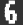
<style>
.page{position:relative;width:23px;height:25px;background:#333333}
.page>*{position:absolute;margin:0}
.t1{font:38.9px "VT323-Regular";color:#ffffff;font-weight:bold;scale:0.9 1}
</style>
<div class="page">
<p class="t1" style="left:4px;top:0px;width:13px;height:24px">6</p>
</div>
